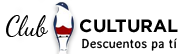
<style>
.page{position:relative;width:180px;height:54px;background:#ffffff}
.page>*{position:absolute;margin:0}
.t1{font:26.7px "DancingScript";color:#000000}
.t2{font:17.8px "Gotham-Bold";color:#000000;text-transform:uppercase}
.t3{font:12.7px "AveriaSans-Regular";color:#000000}
</style>
<div class="page">
<p class="t1" style="left:6px;top:15px;width:42px;height:22px">Club</p>
<p class="t2" style="left:80px;top:19px;width:98px;height:14px">CULTURAL</p>
<p class="t3" style="left:82px;top:38px;width:95px;height:13px">Descuentos pa tí</p>
</div>
